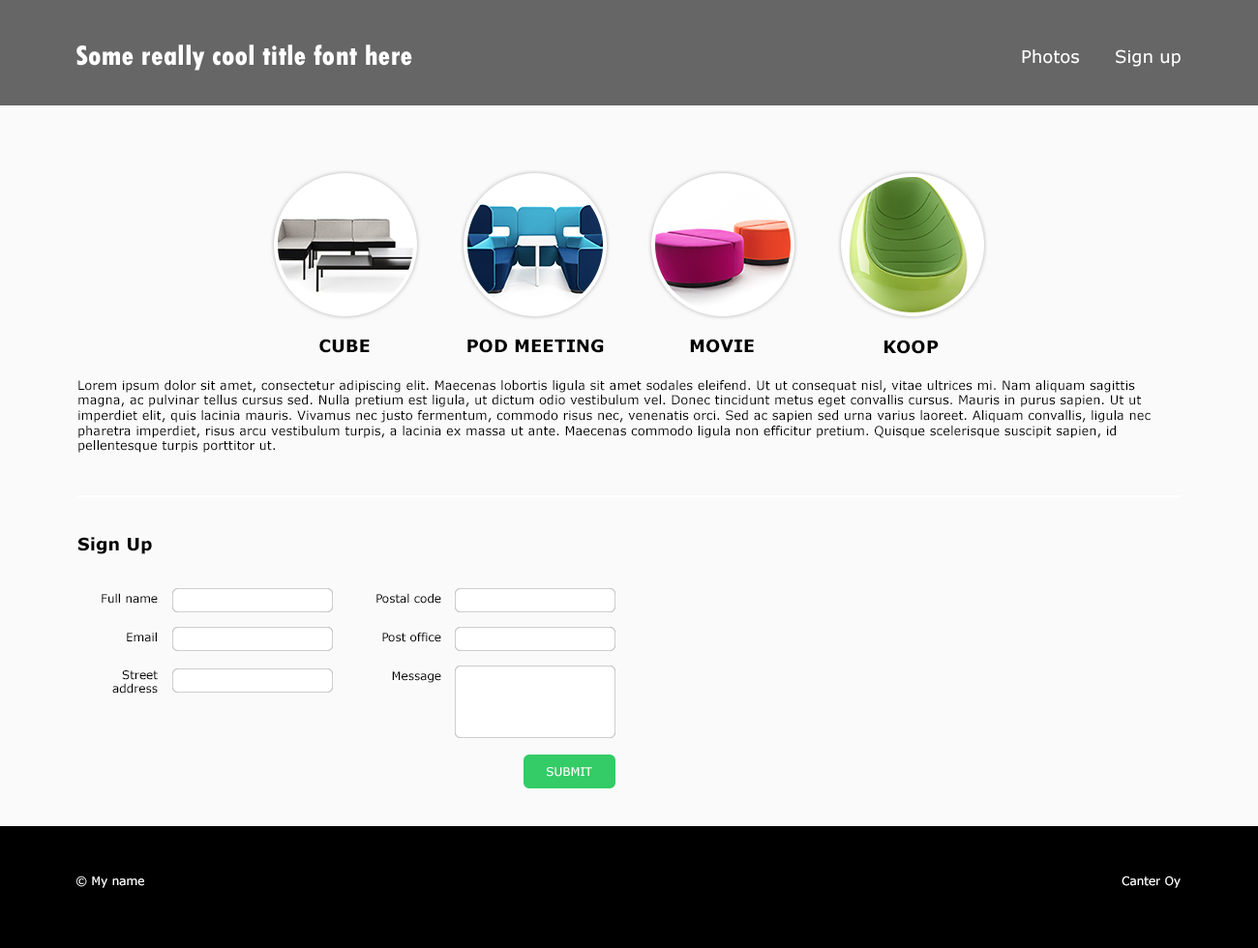
<style>
.page{position:relative;width:1258px;height:948px;background:#fafafa}
.page>*{position:absolute;margin:0}
.t1{font:29px "TwCenMT-CondensedExtraBold";color:#ffffff}
.t2{font:17.4px "Verdana";color:#ffffff}
.t3{font:17.4px "Verdana-Bold";color:#000000}
.t4{font:12.6px "Verdana";color:#000000}
.t5{font:11.6px "Verdana";color:#000000}
.t6{font:11.6px "Verdana";color:#ffffff}
</style>
<div class="page">
<p class="t1" style="left:76px;top:45px;width:336px;height:26px">Some really cool title font here</p>
<p class="t2" style="left:1022px;top:49px;width:57px;height:15px">Photos</p>
<p class="t2" style="left:1115px;top:49px;width:65px;height:18px">Sign up</p>
<p class="t3" style="left:319px;top:339px;width:51px;height:14px">CUBE</p>
<p class="t3" style="left:467px;top:339px;width:137px;height:14px">POD MEETING</p>
<p class="t3" style="left:690px;top:339px;width:64px;height:14px">MOVIE</p>
<p class="t3" style="left:884px;top:340px;width:54px;height:14px">KOOP</p>
<p class="t4" style="left:78px;top:380px;width:1072px;height:73px">Lorem ipsum dolor sit amet, consectetur adipiscing elit. Maecenas lobortis ligula sit amet sodales eleifend. Ut ut consequat nisl, vitae ultrices mi. Nam aliquam sagittis magna, ac pulvinar tellus cursus sed. Nulla pretium est ligula, ut dictum odio vestibulum vel. Donec tincidunt metus eget convallis cursus. Mauris in purus sapien. Ut ut imperdiet elit, quis lacinia mauris. Vivamus nec justo fermentum, commodo risus nec, venenatis orci. Sed ac sapien sed urna varius laoreet. Aliquam convallis, ligula nec pharetra imperdiet, risus arcu vestibulum turpis, a lacinia ex massa ut ante. Maecenas commodo ligula non efficitur pretium. Quisque scelerisque suscipit sapien, id pellentesque turpis porttitor ut.</p>
<p class="t3" style="left:78px;top:537px;width:74px;height:17px">Sign Up</p>
<p class="t5" style="left:102px;top:593px;width:56px;height:11px">Full name</p>
<p class="t5" style="left:376px;top:593px;width:65px;height:11px">Postal code</p>
<p class="t5" style="left:127px;top:632px;width:30px;height:10px">Email</p>
<p class="t5" style="left:382px;top:632px;width:59px;height:10px">Post office</p>
<p class="t5" style="left:112px;top:670px;width:46px;height:24px;text-align:right">Street address</p>
<p class="t5" style="left:392px;top:671px;width:49px;height:12px">Message</p>
<p class="t6" style="left:547px;top:767px;width:45px;height:10px">SUBMIT</p>
<p class="t6" style="left:76px;top:877px;width:68px;height:11px">© My name</p>
<p class="t6" style="left:1121px;top:877px;width:59px;height:11px">Canter Oy</p>
</div>
